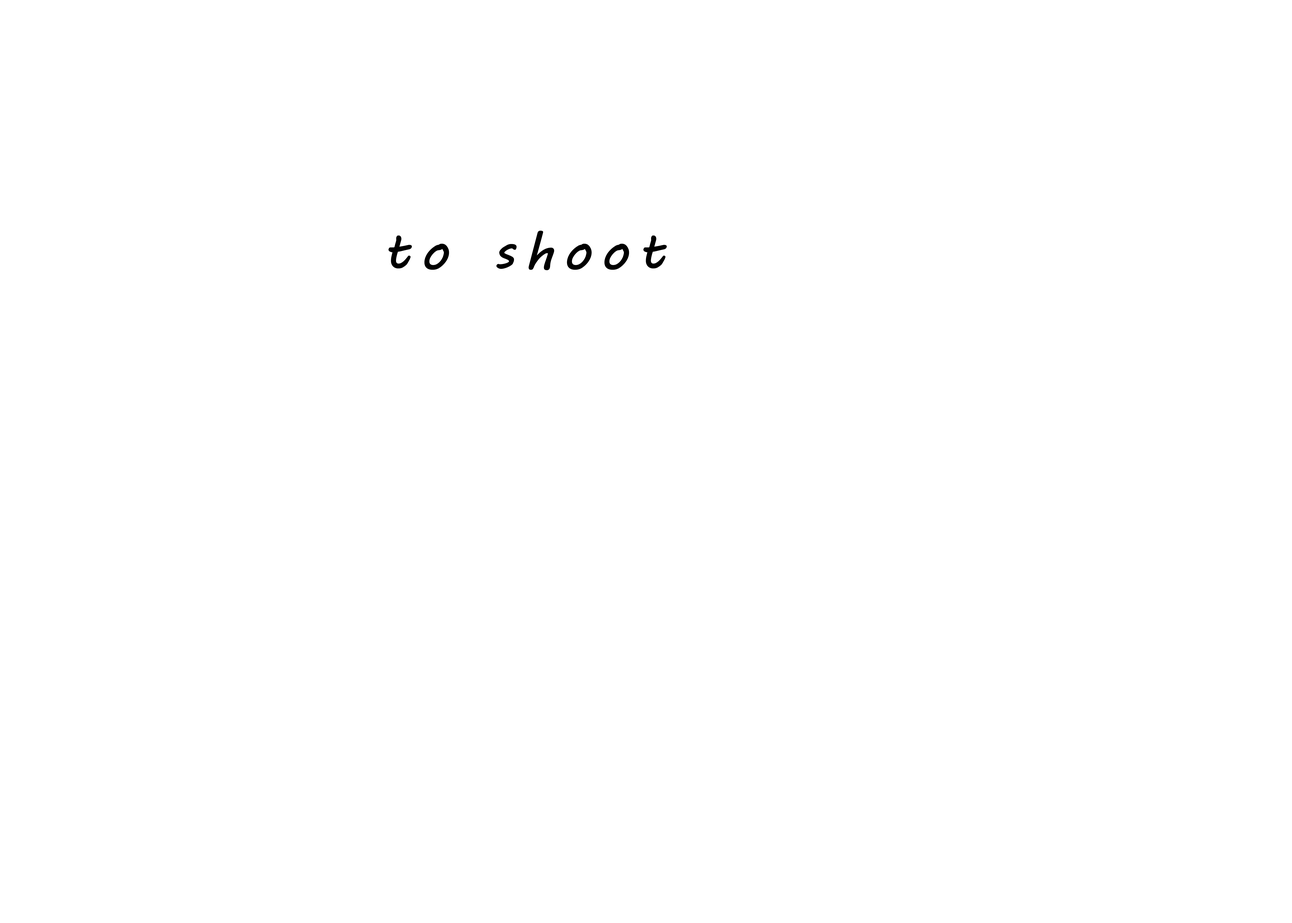
<style>
.page{position:relative;width:1292px;height:923px;background:#ffffff}
.page>*{position:absolute;margin:0}
.t1{font:51.1px "MVBoli";letter-spacing:0.14em;color:#000000;font-weight:bold;scale:1.05 1}
</style>
<div class="page">
<p class="t1" style="left:389px;top:231px;width:278px;height:39px">to shoot</p>
</div>
